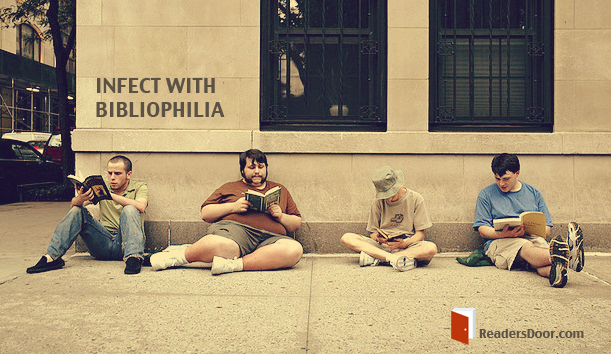
<style>
.page{position:relative;width:611px;height:354px}
.page>*{position:absolute;margin:0}
.t1{font:20px "CharcoalCY";color:#5b5145}
.t2{font:12px "CharcoalCY";color:#5b5145}
</style>
<div class="page">
<p class="t1" style="left:96px;top:78px;width:129px;height:39px">INFECT WITH<br>BIBLIOPHILIA</p>
<p class="t2" style="left:479px;top:329px;width:105px;height:9px">ReadersDoor.com</p>
</div>
